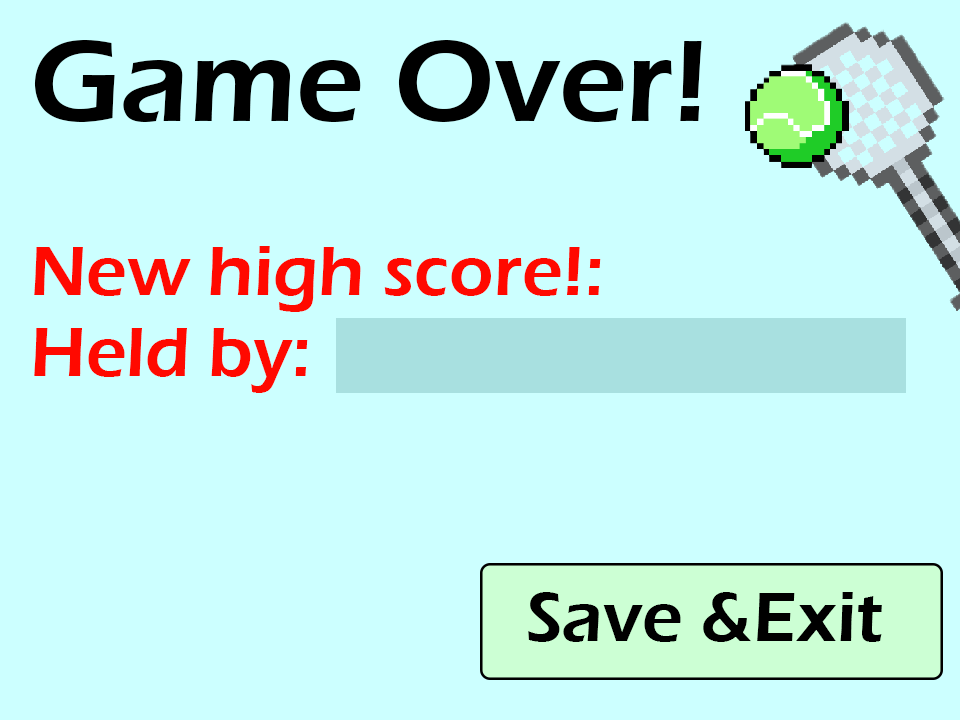
<style>
.page{position:relative;width:960px;height:720px;background:#ccffff}
.page>*{position:absolute;margin:0}
.t1{font:120px "ErasITC-Demi";color:#000000}
.t2{font:72px "ErasITC-Demi";color:#ff0900}
.t3{font:72px "ErasITC-Demi";color:#000000}
</style>
<div class="page">
<p class="t1" style="left:34px;top:40px;width:668px;height:82px">Game Over!</p>
<p class="t2" style="left:34px;top:246px;width:567px;height:66px">New high score!:</p>
<p class="t2" style="left:34px;top:328px;width:274px;height:65px">Held by:</p>
<p class="t3" style="left:528px;top:592px;width:354px;height:50px">Save &amp;Exit</p>
</div>
